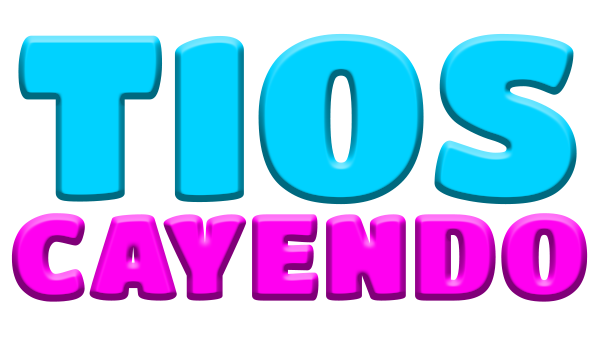
<style>
.page{position:relative;width:600px;height:338px;background:#ffffff}
.page>*{position:absolute;margin:0}
.t1{font:116.7px/100px "TitanOne";color:#ff00f0;font-weight:bold}
.t2{font:225px/100px "TitanOne";color:#00d2ff;font-weight:bold}
</style>
<div class="page">
<p class="t1" style="left:11px;top:33px;width:577px;height:269px;text-align:center"><span class="t2">TIOS<br></span>CAYENDO</p>
</div>
